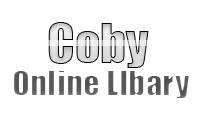
<style>
.page{position:relative;width:202px;height:125px;background:#ffffff}
.page>*{position:absolute;margin:0}
.t1{font:33.3px "Impact"}
</style>
<div class="page">
<p class="t1" style="left:13px;top:70px;width:177px;height:29px">Online LIbary</p>
</div>
